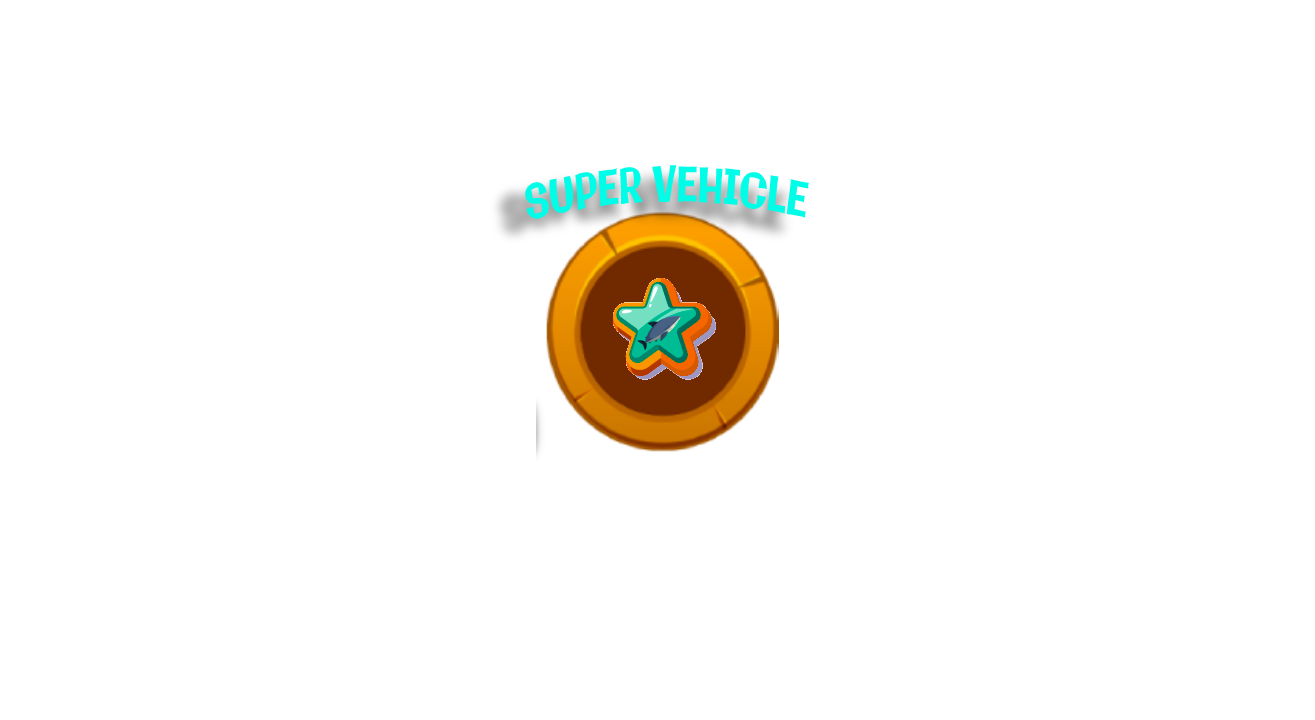
<style>
.page{position:relative;width:1315px;height:720px;background:#ffffff}
.page>*{position:absolute;margin:0}
.t1{font:47.9px "Galindo-Regular";color:#0ffde9;scale:0.71 1}
</style>
<div class="page">
<p class="t1" style="left:525px;top:165px;width:284px;height:54px">SUPER VEHICLE</p>
</div>
